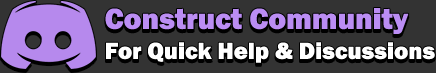
<style>
.page{position:relative;width:436px;height:73px;background:#333333}
.page>*{position:absolute;margin:0}
.t1{font:24px/30px "FranklinGothic-Heavy";color:#ffffff}
.t2{font:30px/30px "FranklinGothic-Heavy";color:#bb8df4}
</style>
<div class="page">
<p class="t1" style="left:105px;top:8px;width:330px;height:55px"><span class="t2">Construct Community<br></span>For Quick Help &amp; Discussions</p>
</div>
